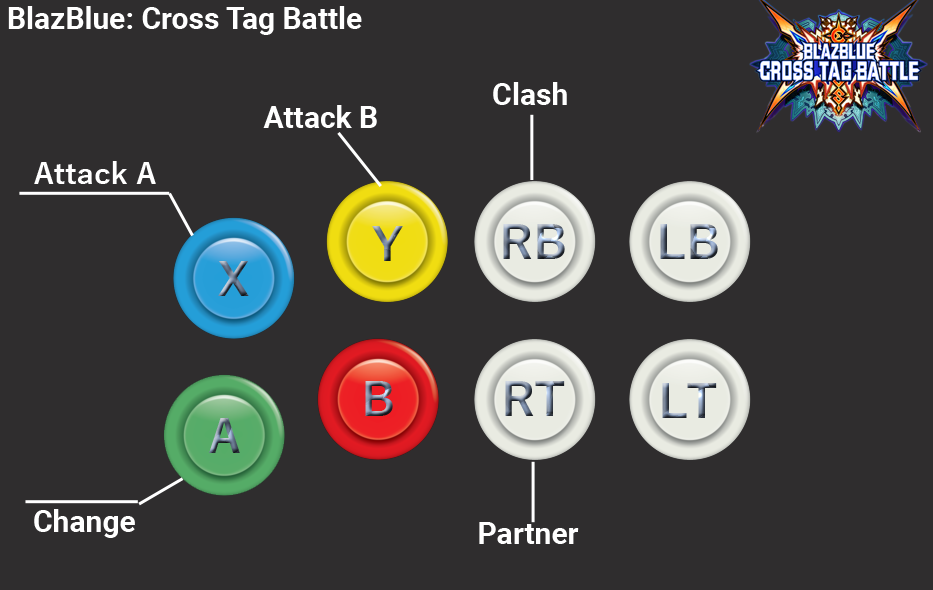
<style>
.page{position:relative;width:933px;height:590px;background:#2f2d2e}
.page>*{position:absolute;margin:0}
.t1{font:30px "Roboto-Bold";color:#ffffff}
.t2{font:30px "YuGothic-Bold";color:#ffffff}
</style>
<div class="page">
<p class="t1" style="left:8px;top:6px;width:354px;height:29px">BlazBlue: Cross Tag Battle</p>
<p class="t1" style="left:493px;top:82px;width:74px;height:23px">Clash</p>
<p class="t1" style="left:263px;top:105px;width:114px;height:23px">Attack B</p>
<p class="t2" style="left:34px;top:161px;width:122px;height:23px">Attack A</p>
<p class="t1" style="left:34px;top:509px;width:101px;height:29px">Change</p>
<p class="t1" style="left:479px;top:522px;width:100px;height:22px">Partner</p>
</div>
